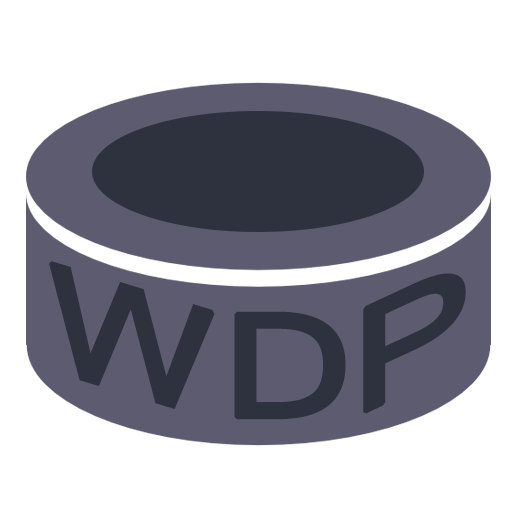
<style>
.page{position:relative;width:512px;height:512px;background:#ffffff}
.page>*{position:absolute;margin:0}
.t1{font:157.7px "Shruti";letter-spacing:0.001em;color:#2e323f;font-weight:bold;scale:1.25 1}
.t2{font:155.3px "Shruti";letter-spacing:0.001em;color:#2e323f;font-weight:bold;scale:1.38 1}
.t3{font:155.3px "Shruti";letter-spacing:0.001em;color:#2e323f;font-weight:bold;scale:1.25 1}
</style>
<div class="page">
<p class="t1" style="left:49px;top:261px;width:166px;height:148px;rotate:17deg">W</p>
<p class="t2" style="left:363px;top:273px;width:103px;height:141px;rotate:-25deg">P</p>
<p class="t3" style="left:234px;top:311px;width:112px;height:109px">D</p>
</div>
